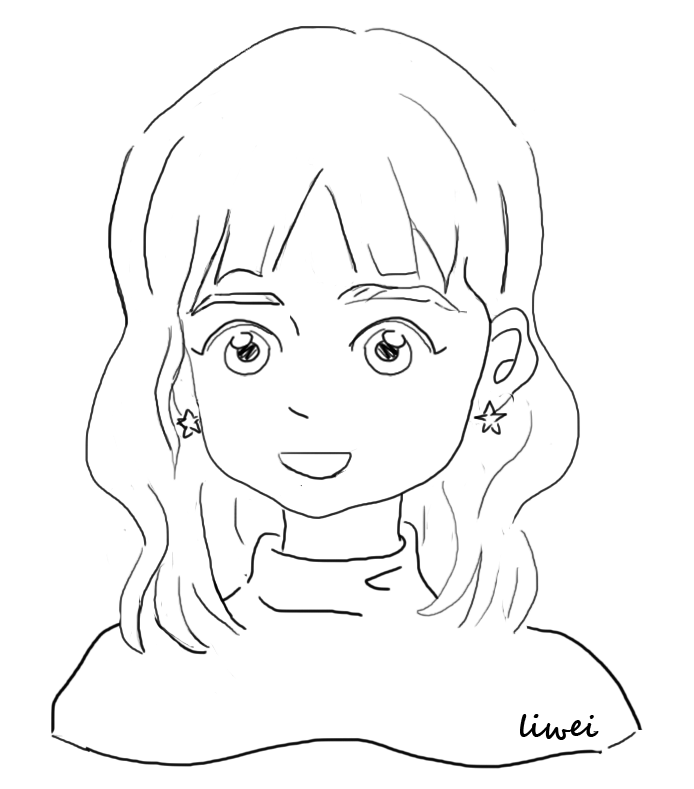
<style>
.page{position:relative;width:694px;height:789px;background:#ffffff}
.page>*{position:absolute;margin:0}
.t1{font:30px "SegoeScript-Bold";color:#000000}
</style>
<div class="page">
<p class="t1" style="left:520px;top:714px;width:79px;height:26px">liwei</p>
</div>
